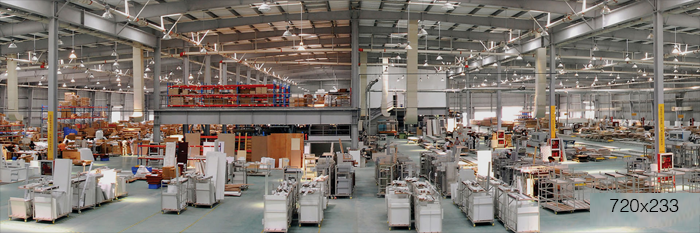
<style>
.page{position:relative;width:700px;height:233px}
.page>*{position:absolute;margin:0}
.t1{font:18.2px "Helvetica-Light";color:#000000}
</style>
<div class="page">
<p class="t1" style="left:610px;top:199px;width:69px;height:13px">720x233</p>
</div>
